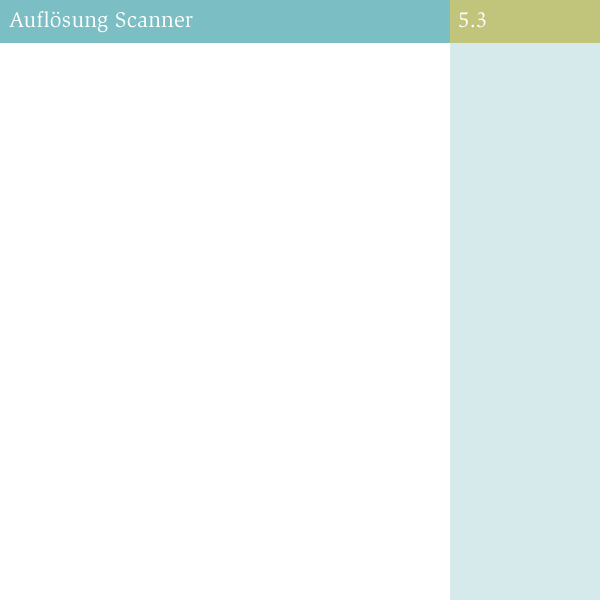
<style>
.page{position:relative;width:600px;height:600px;background:#ffffff}
.page>*{position:absolute;margin:0}
.t1{font:22px "Slimbach-Book";letter-spacing:0.01em;color:#ffffff}
.t2{font:22px "Slimbach-Book";color:#ffffff}
</style>
<div class="page">
<p class="t1" style="left:9px;top:11px;width:184px;height:22px">Auflösung Scanner</p>
<p class="t2" style="left:459px;top:11px;width:27px;height:17px">5.3</p>
</div>
